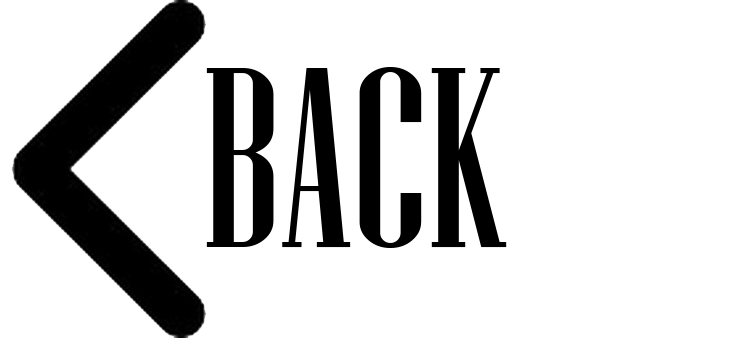
<style>
.page{position:relative;width:754px;height:338px;background:#ffffff}
.page>*{position:absolute;margin:0}
.t1{font:256px "NiagaraSolid-Reg";color:#000000}
</style>
<div class="page">
<p class="t1" style="left:206px;top:67px;width:301px;height:181px">BACK</p>
</div>
